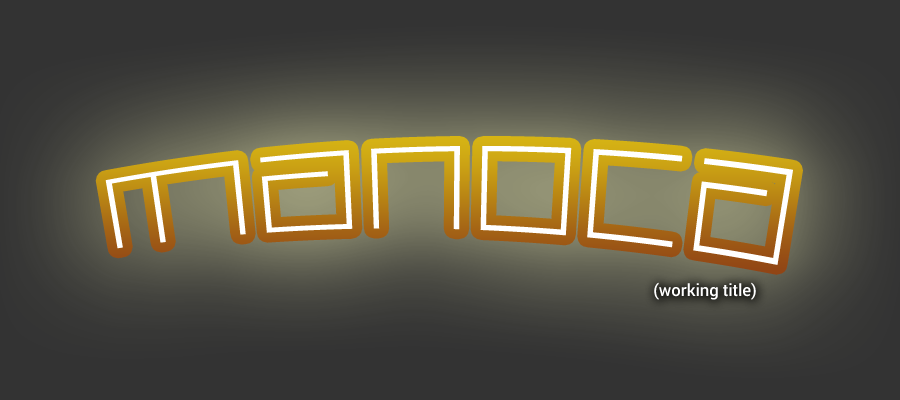
<style>
.page{position:relative;width:900px;height:400px;background:#333333}
.page>*{position:absolute;margin:0}
.t1{font:208.4px "SquaredDisplay";color:#ffffff}
.t2{font:16.7px "Roboto-Medium";color:#ffffff}
</style>
<div class="page">
<p class="t1" style="left:105px;top:146px;width:688px;height:119px">MANOCA</p>
<p class="t2" style="left:654px;top:282px;width:102px;height:18px">(working title)</p>
</div>
